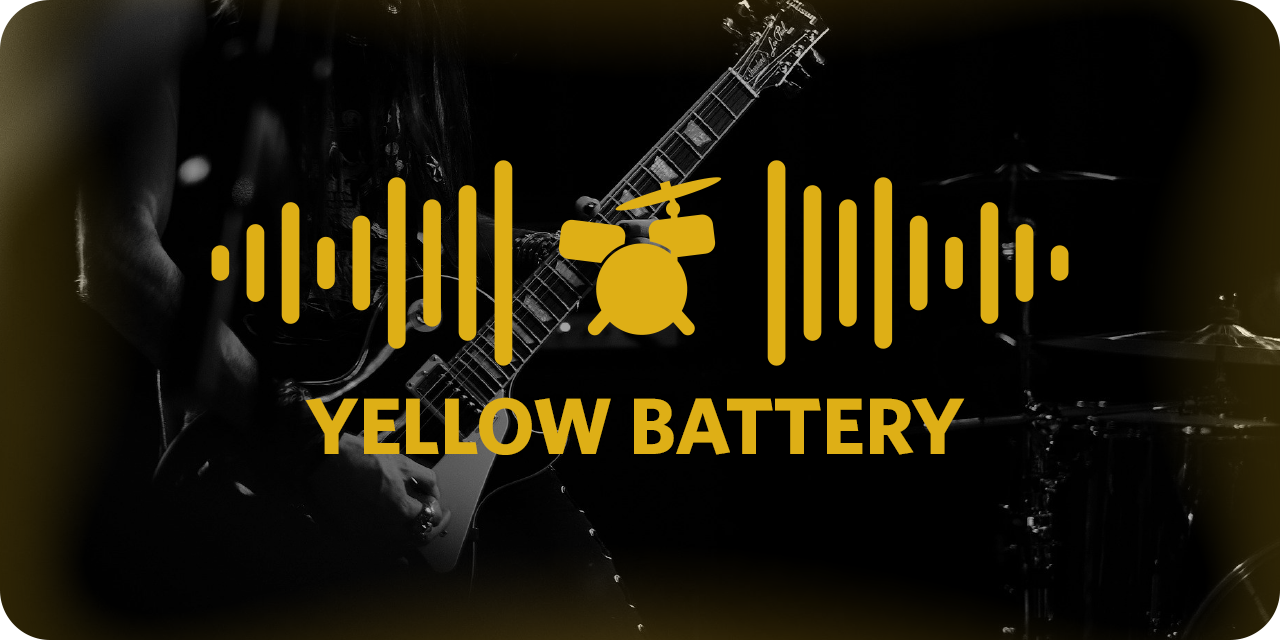
<style>
.page{position:relative;width:1280px;height:640px;background:#000000}
.page>*{position:absolute;margin:0}
.t1{font:80px "Whitney-Bold";color:#deaf16;text-transform:uppercase}
</style>
<div class="page">
<p class="t1" style="left:305px;top:397px;width:660px;height:58px">Yellow Battery</p>
</div>
